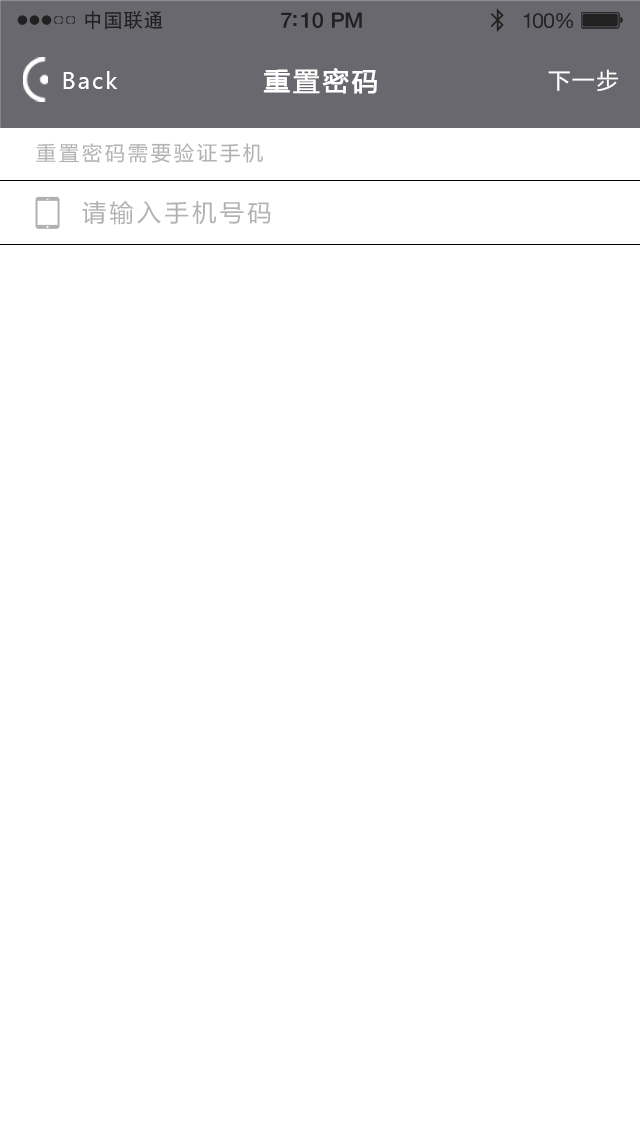
<style>
.page{position:relative;width:640px;height:1136px;background:#ffffff}
.page>*{position:absolute;margin:0}
.t1{font:19.7px "AdobeHeitiStd-Regular";letter-spacing:0.02em;color:#212121}
.t2{font:21.4px "HelveticaNeue-Medium";letter-spacing:-0.02em;color:#212121}
.t3{font:20.6px "HelveticaNeue";letter-spacing:-0.02em;color:#212121}
.t4{font:22px "MicrosoftYaHei";letter-spacing:0.1em;color:#ffffff}
.t5{font:26px "MicrosoftYaHei";letter-spacing:0.1em;color:#ffffff;font-weight:bold}
.t6{font:20px "MicrosoftYaHei";letter-spacing:0.15em;color:#b2b2b2}
.t7{font:24px "MicrosoftYaHei";letter-spacing:0.15em;color:#b2b2b2}
</style>
<div class="page">
<p class="t1" style="left:85px;top:10px;width:78px;height:20px">中国联通</p>
<p class="t2" style="left:281px;top:12px;width:81px;height:16px">7:10 PM</p>
<p class="t3" style="left:523px;top:13px;width:50px;height:16px">100%</p>
<p class="t4" style="left:63px;top:71px;width:55px;height:18px">Back</p>
<p class="t5" style="left:263px;top:68px;width:114px;height:26px">重置密码</p>
<p class="t4" style="left:548px;top:69px;width:71px;height:23px">下一步</p>
<p class="t6" style="left:36px;top:143px;width:227px;height:20px">重置密码需要验证手机</p>
<p class="t7" style="left:82px;top:201px;width:189px;height:24px">请输入手机号码</p>
</div>
